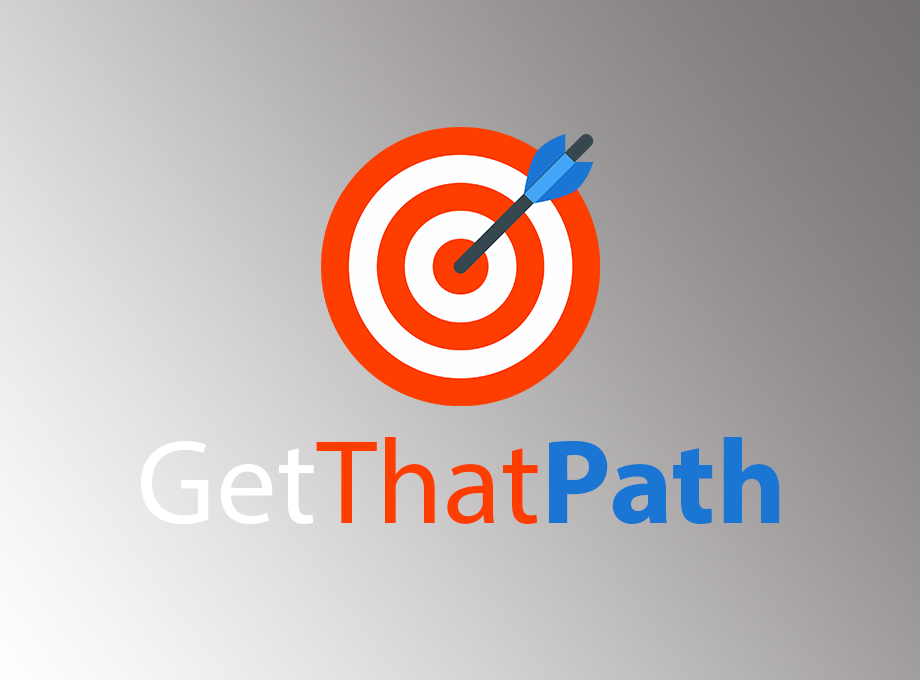
<style>
.page{position:relative;width:920px;height:680px}
.page>*{position:absolute;margin:0}
.t1{font:120.8px "MyriadPro-Regular";color:#fe3d01}
.t2{font:120.8px "MyriadPro-Regular";color:#ffffff}
.t3{font:120.8px "MyriadPro-Bold";color:#1a76d2}
</style>
<div class="page">
<p class="t1" style="left:141px;top:437px;width:639px;height:87px"><span class="t2">Get</span>That<span class="t3">Path</span></p>
</div>
